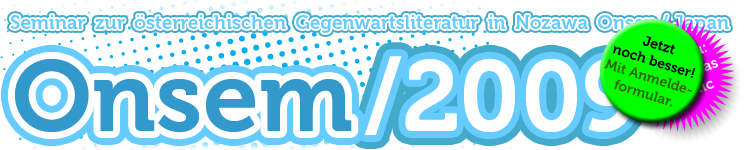
<style>
.page{position:relative;width:750px;height:150px;background:#ffffff}
.page>*{position:absolute;margin:0}
.t1{font:19px "Museo-700";color:#66ccff}
.t2{font:14px "Museo-700";color:#336600}
.t3{font:14px "Museo-700";color:#000000}
.t4{font:100px "Museo-700";color:#3399cc}
.t5{font:100px "Museo-700";color:#ffffff}
</style>
<div class="page">
<p class="t1" style="left:10px;top:15px;width:719px;height:18px">Seminar zur österreichischen Gegenwartsliteratur in Nozawa Onsen / Japan</p>
<p class="t1" style="left:10px;top:15px;width:719px;height:18px">Seminar zur österreichischen Gegenwartsliteratur in Nozawa Onsen / Japan</p>
<p class="t2" style="left:604px;top:35px;width:92px;height:72px;text-align:center;rotate:17deg"><span class="t3">Jetzt<br>noch besser!<br></span>Mit Anmelde-<br>formular.</p>
<p class="t4" style="left:15px;top:58px;width:337px;height:75px">Onsem</p>
<p class="t4" style="left:15px;top:58px;width:337px;height:75px">Onsem</p>
<p class="t5" style="left:365px;top:56px;width:271px;height:79px">/2009</p>
<p class="t5" style="left:365px;top:56px;width:271px;height:79px">/2009</p>
</div>
